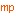
<style>
.page{position:relative;width:16px;height:16px;background:#ffffff}
.page>*{position:absolute;margin:0}
.t1{font:12px "LucidaConsole";color:#ff5400}
</style>
<div class="page">
<p class="t1" style="left:1px;top:5px;width:13px;height:8px">mp</p>
</div>
